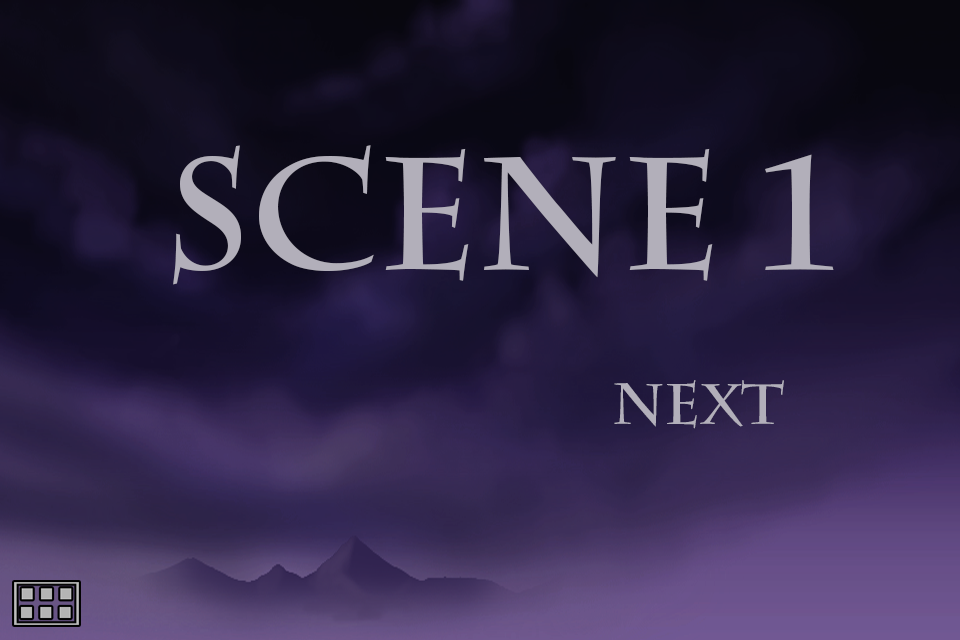
<style>
.page{position:relative;width:960px;height:640px}
.page>*{position:absolute;margin:0}
.t1{font:158px "CharlemagneStd-Bold";color:#b2afba}
.t2{font:57.7px "CharlemagneStd-Bold";color:#b2afba}
</style>
<div class="page">
<p class="t1" style="left:173px;top:145px;width:661px;height:140px">scene 1</p>
<p class="t2" style="left:614px;top:380px;width:170px;height:49px">Next</p>
</div>
